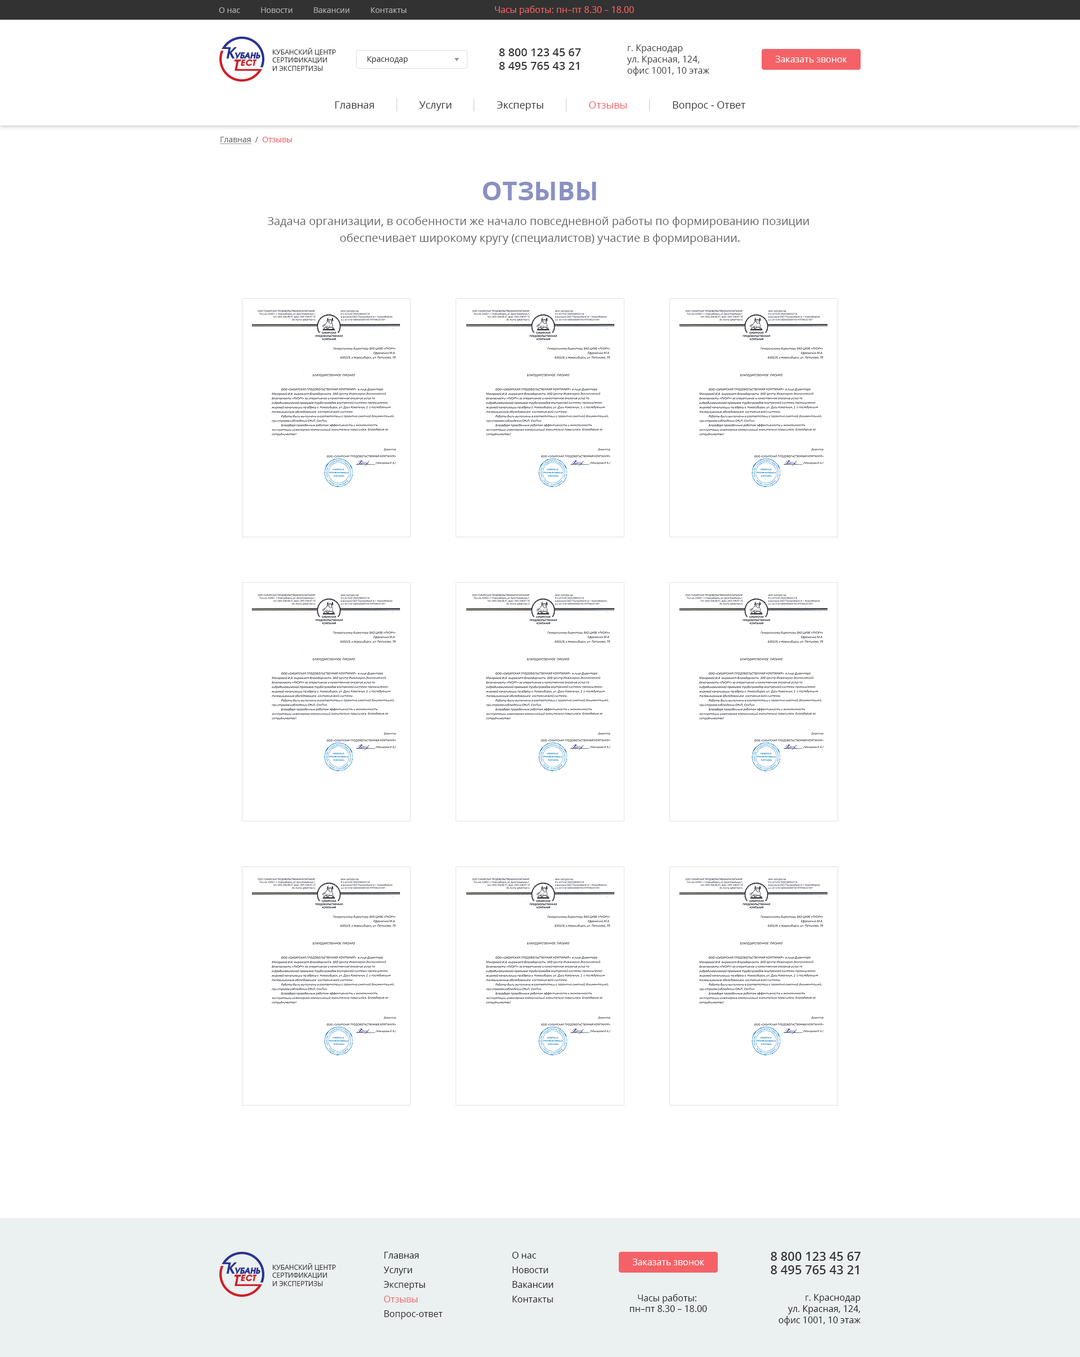
<style>
.page{position:relative;width:1080px;height:1357px;background:#ffffff}
.page>*{position:absolute;margin:0}
.t1{font:9px "OpenSans";color:#f46267}
.t2{font:7.9px "OpenSans";color:#aaaaaa}
.t3{font:6.8px "OpenSans";color:#3c3c3c;text-transform:uppercase}
.t4{font:11.2px "OpenSans-Semibold";color:#323232}
.t5{font:9px/11.2px "OpenSans";color:#3c3c3c}
.t6{font:7.9px "OpenSans";color:#3c3c3c}
.t7{font:9px "OpenSans";color:#ffffff}
.t8{font:10.1px "OpenSans";color:#323232}
.t9{font:10.1px "OpenSans";color:#f46267}
.t10{font:7.9px "OpenSans";color:#646464;text-decoration:underline}
.t11{font:7.9px "OpenSans";color:#646464}
.t12{font:7.9px "OpenSans";color:#f46267}
.t13{font:25.9px "OpenSans-Bold";color:#8a91c1;text-transform:uppercase}
.t14{font:11.2px/16.9px "OpenSans";color:#646464}
.t15{font:9px/14.6px "OpenSans";color:#1e1e1e}
.t16{font:9px/14.6px "OpenSans";color:#f46267}
.t17{font:12.4px "OpenSans-Semibold";color:#323232}
.t18{font:9px "OpenSans";color:#1e1e1e}
.t19{font:9px/11.2px "OpenSans";color:#1e1e1e}
</style>
<div class="page">
<p class="t1" style="left:495px;top:6px;width:139px;height:9px">Часы работы: пн–пт 8.30 – 18.00</p>
<p class="t2" style="left:219px;top:7px;width:188px;height:6px">О нас          Новости          Вакансии          Контакты</p>
<p class="t3" style="left:272px;top:48px;width:64px;height:23px">Кубанский центр<br>сертификации<br>и экспертизы</p>
<p class="t4" style="left:499px;top:48px;width:82px;height:8px">8 800 123 45 67</p>
<p class="t5" style="left:627px;top:44px;width:83px;height:32px">г. Краснодар<br>ул. Красная, 124, <br>офис 1001, 10 этаж</p>
<p class="t6" style="left:367px;top:56px;width:41px;height:8px">Краснодар</p>
<p class="t4" style="left:499px;top:62px;width:80px;height:8px">8 495 765 43 21</p>
<p class="t7" style="left:775px;top:56px;width:72px;height:6px">Заказать звонок</p>
<p class="t8" style="left:335px;top:101px;width:411px;height:10px">Главная                 Услуги                 Эксперты                 <span class="t9">Отзывы                 </span>Вопрос - Ответ</p>
<p class="t10" style="left:220px;top:137px;width:72px;height:7px">Главная<span class="t11">  /  </span><span class="t12">Отзывы</span></p>
<p class="t13" style="left:483px;top:182px;width:113px;height:18px">Отзывы</p>
<p class="t14" style="left:268px;top:217px;width:541px;height:28px;text-align:center">Задача организации, в особенности же начало повседневной работы по формированию позиции <br>обеспечивает широкому кругу (специалистов) участие в формировании.</p>
<p class="t15" style="left:384px;top:1252px;width:59px;height:67px">Главная<br>Услуги<br>Эксперты<br><span class="t16">Отзывы<br></span>Вопрос-ответ</p>
<p class="t15" style="left:512px;top:1252px;width:42px;height:50px">О нас<br>Новости<br>Вакансии<br>Контакты</p>
<p class="t17" style="left:771px;top:1252px;width:90px;height:9px">8 800 123 45 67</p>
<p class="t3" style="left:272px;top:1263px;width:64px;height:23px">Кубанский центр<br>сертификации<br>и экспертизы</p>
<p class="t7" style="left:632px;top:1258px;width:72px;height:7px">Заказать звонок</p>
<p class="t17" style="left:771px;top:1265px;width:88px;height:9px">8 495 765 43 21</p>
<p class="t18" style="left:630px;top:1294px;width:77px;height:18px;text-align:center">Часы работы: <br>пн–пт 8.30 – 18.00</p>
<p class="t19" style="left:778px;top:1294px;width:83px;height:31px;text-align:right">г. Краснодар<br>ул. Красная, 124,<br>офис 1001, 10 этаж</p>
</div>
